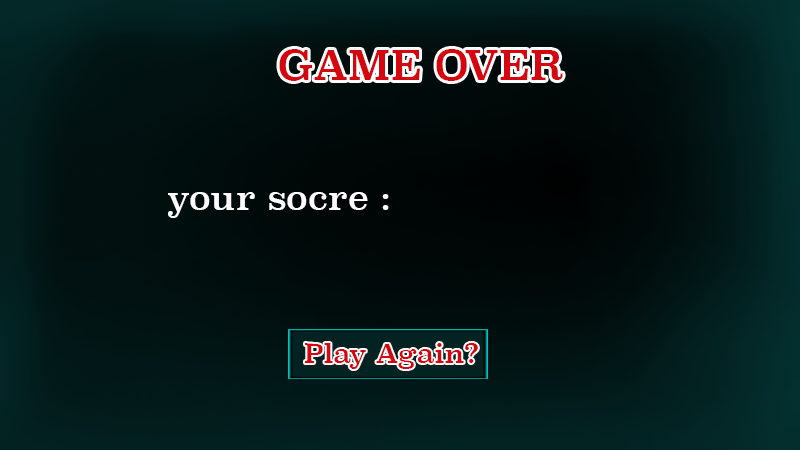
<style>
.page{position:relative;width:800px;height:450px}
.page>*{position:absolute;margin:0}
.t1{font:40.1px "Superclarendon-Regular";color:#d40711}
.t2{font:34.1px "Superclarendon-Regular";color:#ffffff}
</style>
<div class="page">
<p class="t1" style="left:279px;top:49px;width:284px;height:32px">GAME OVER</p>
<p class="t2" style="left:168px;top:192px;width:221px;height:26px">your socre :</p>
</div>
